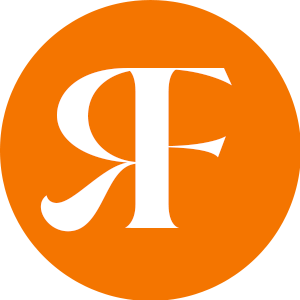
<style>
.page{position:relative;width:300px;height:300px;background:#f47500}
.page>*{position:absolute;margin:0}
.t1{font:229.2px "SonderRegular";color:#ffffff}
</style>
<div class="page">
<p class="t1" style="left:40px;top:68px;width:139px;height:164px;rotate:180deg">R</p>
<p class="t1" style="left:125px;top:68px;width:107px;height:160px">F</p>
</div>
